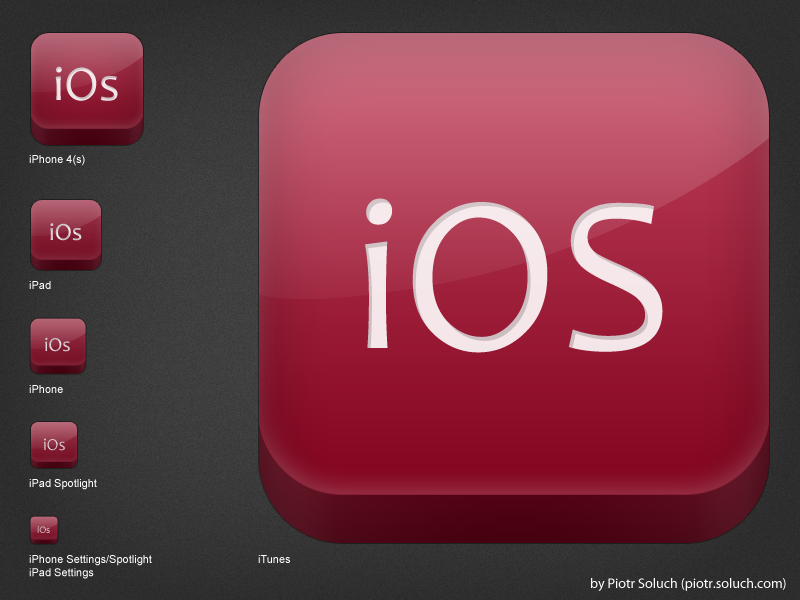
<style>
.page{position:relative;width:800px;height:600px}
.page>*{position:absolute;margin:0}
.t1{font:50px "Candara"}
.t2{font:11px "ArialMT";color:#ffffff}
.t3{font:225px "Candara";color:#f4e6e9}
.t4{font:25px "Candara";color:#d3c7ca}
.t5{font:20px "Candara";color:#d4c9cc}
.t6{font:17px "Candara";color:#cfc5c7}
.t7{font:10px "Candara"}
.t8{font:14px "MyriadPro-Regular";color:#ffffff}
</style>
<div class="page">
<p class="t1" style="left:55px;top:66px;width:63px;height:35px">iOs</p>
<p class="t2" style="left:29px;top:155px;width:56px;height:11px">iPhone 4(s)</p>
<p class="t3" style="left:365px;top:198px;width:298px;height:155px">iOS</p>
<p class="t4" style="left:50px;top:223px;width:32px;height:18px">iOs</p>
<p class="t2" style="left:29px;top:281px;width:22px;height:8px">iPad</p>
<p class="t5" style="left:45px;top:337px;width:25px;height:15px">iOs</p>
<p class="t2" style="left:29px;top:385px;width:34px;height:8px">iPhone</p>
<p class="t6" style="left:44px;top:438px;width:21px;height:13px">iOs</p>
<p class="t2" style="left:29px;top:479px;width:68px;height:11px">iPad Spotlight</p>
<p class="t7" style="left:37px;top:526px;width:13px;height:7px">iOs</p>
<p class="t2" style="left:29px;top:555px;width:123px;height:24px">iPhone Settings/Spotlight<br>iPad Settings</p>
<p class="t2" style="left:258px;top:555px;width:32px;height:8px">iTunes</p>
<p class="t8" style="left:591px;top:578px;width:195px;height:13px">by Piotr Soluch (piotr.soluch.com)</p>
</div>
